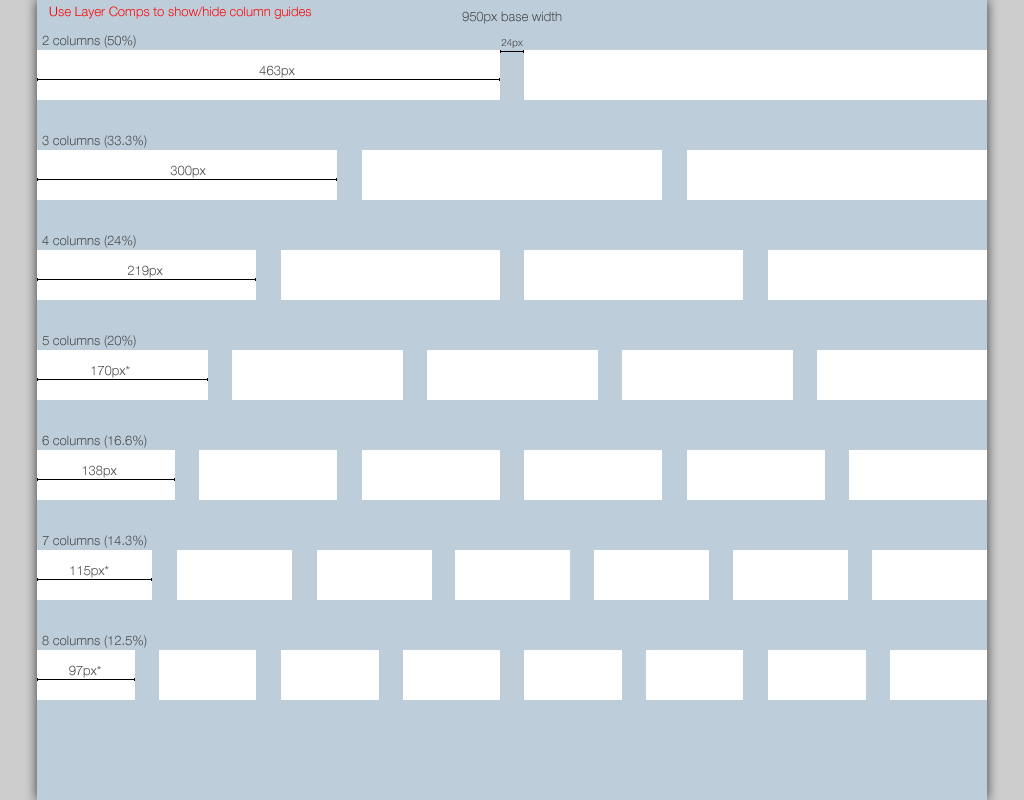
<style>
.page{position:relative;width:1024px;height:800px;background:#bdceda}
.page>*{position:absolute;margin:0}
.t1{font:13px "HelveticaNeue-Light";color:#ff0000}
.t2{font:13px "HelveticaNeue-Light";color:#444444}
.t3{font:10px "HelveticaNeue-Light"}
</style>
<div class="page">
<p class="t1" style="left:49px;top:6px;width:262px;height:13px">Use Layer Comps to show/hide column guides</p>
<p class="t2" style="left:462px;top:11px;width:100px;height:13px">950px base width</p>
<p class="t2" style="left:42px;top:35px;width:94px;height:13px">2 columns (50%)</p>
<p class="t3" style="left:501px;top:39px;width:22px;height:9px">24px</p>
<p class="t2" style="left:259px;top:65px;width:36px;height:13px">463px</p>
<p class="t2" style="left:42px;top:135px;width:105px;height:13px">3 columns (33.3%)</p>
<p class="t2" style="left:170px;top:165px;width:36px;height:13px">300px</p>
<p class="t2" style="left:42px;top:235px;width:94px;height:13px">4 columns (24%)</p>
<p class="t2" style="left:127px;top:265px;width:36px;height:13px">219px</p>
<p class="t2" style="left:42px;top:335px;width:94px;height:13px">5 columns (20%)</p>
<p class="t2" style="left:91px;top:365px;width:39px;height:13px">170px*</p>
<p class="t2" style="left:42px;top:435px;width:105px;height:13px">6 columns (16.6%)</p>
<p class="t2" style="left:82px;top:465px;width:35px;height:13px">138px</p>
<p class="t2" style="left:42px;top:535px;width:105px;height:13px">7 columns (14.3%)</p>
<p class="t2" style="left:70px;top:565px;width:39px;height:13px">115px*</p>
<p class="t2" style="left:42px;top:635px;width:105px;height:13px">8 columns (12.5%)</p>
<p class="t2" style="left:69px;top:665px;width:32px;height:13px">97px*</p>
</div>
